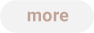
<style>
.page{position:relative;width:94px;height:33px;background:#f2f2f2}
.page>*{position:absolute;margin:0}
.t1{font:17.7px "Roboto-Bold";letter-spacing:0.02em;color:#c1a397}
</style>
<div class="page">
<p class="t1" style="left:27px;top:11px;width:42px;height:11px">more</p>
</div>
